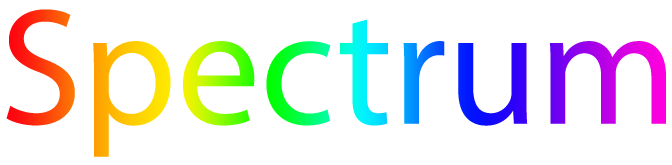
<style>
.page{position:relative;width:672px;height:165px;background:#ffffff}
.page>*{position:absolute;margin:0}
.t1{font:166.7px "MyriadPro-Regular"}
</style>
<div class="page">
<p class="t1" style="left:6px;top:9px;width:660px;height:148px">Spectrum</p>
</div>
